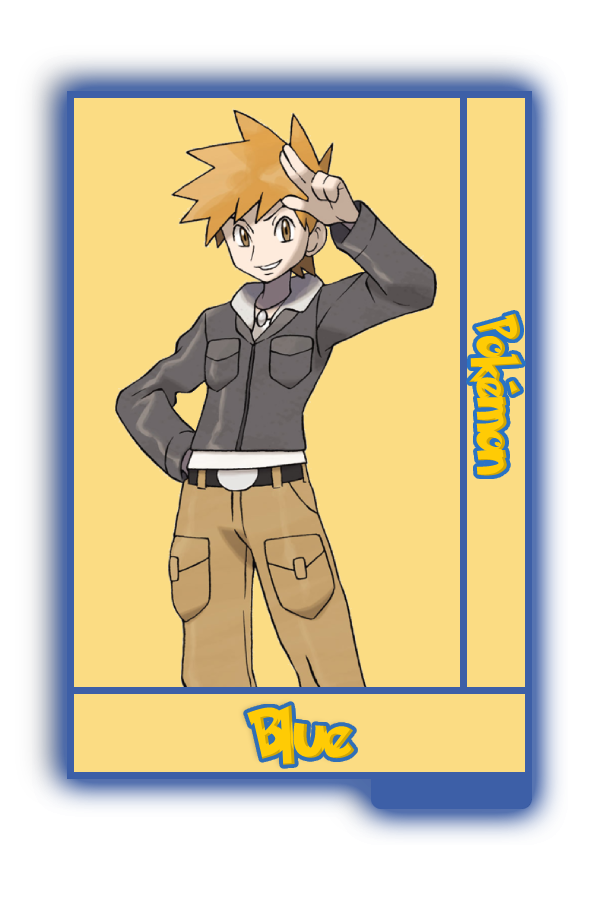
<style>
.page{position:relative;width:600px;height:900px;background:#fbdc83}
.page>*{position:absolute;margin:0}
.t1{font:48.8px "PokemonSolidNormal";color:#ffcb05;scale:0.8 1}
.t2{font:56.6px "PokemonSolidNormal";color:#ffcb05;scale:0.92 1}
</style>
<div class="page">
<p class="t1" style="left:469px;top:313px;width:54px;height:163px;rotate:90deg">Pokémon</p>
<p class="t2" style="left:247px;top:704px;width:108px;height:61px">Blue</p>
</div>
